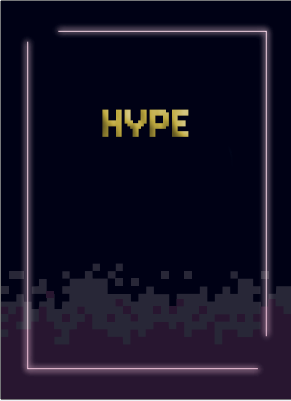
<style>
.page{position:relative;width:291px;height:401px;background:#000115}
.page>*{position:absolute;margin:0}
.t1{font:50px "Jersey10-Regular";letter-spacing:0.025em}
</style>
<div class="page">
<p class="t1" style="left:102px;top:109px;width:87px;height:28px">HYPE</p>
</div>
